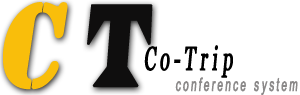
<style>
.page{position:relative;width:300px;height:95px;background:#ffffff}
.page>*{position:absolute;margin:0}
.t1{font:121px "Stencil";letter-spacing:0.26em;color:#f9be0b;font-weight:bold;font-style:italic;scale:0.85 1}
.t2{font:121px "LatinWide";letter-spacing:0.26em;color:#0f0e0e;font-weight:bold;font-style:italic;scale:0.43 1}
.t3{font:33.1px "Vani";letter-spacing:0.26em;color:#000000;font-weight:bold;font-style:italic;scale:0.54 1}
.t4{font:18.4px "ArialMT";letter-spacing:0.26em;color:#8b8989;font-weight:bold;font-style:italic;scale:0.54 1}
</style>
<div class="page">
<p class="t1" style="left:3px;top:2px;width:150px;height:88px">C<span class="t2">T</span></p>
<p class="t3" style="left:144px;top:45px;width:89px;height:33px">Co-Trip</p>
<p class="t4" style="left:175px;top:77px;width:123px;height:19px">conference system</p>
</div>
